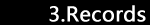
<style>
.page{position:relative;width:150px;height:25px;background:#000000}
.page>*{position:absolute;margin:0}
.t1{font:20px "MicrosoftYaHei";color:#ffffff;font-weight:bold}
</style>
<div class="page">
<p class="t1" style="left:49px;top:5px;width:97px;height:17px">3.Records</p>
</div>
